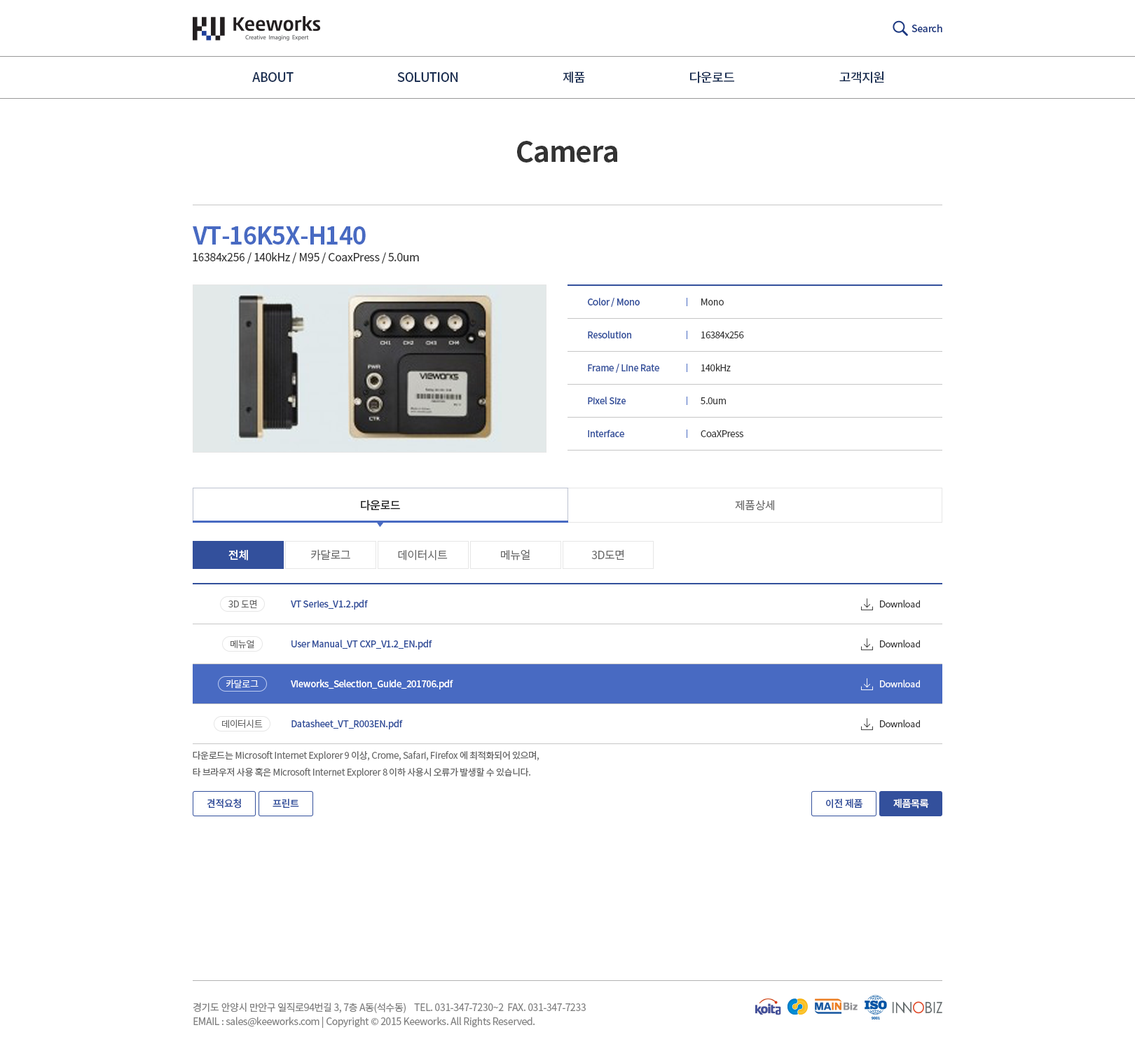
<style>
.page{position:relative;width:1135px;height:1051px;background:#ffffff}
.page>*{position:absolute;margin:0}
.t1{font:9.8px "NotoSansCJKkr-Medium";letter-spacing:-0.025em;color:#1b3780}
.t2{font:12.6px "NotoSansCJKkr-Medium";letter-spacing:-0.025em;color:#1c3053;text-transform:uppercase}
.t3{font:28px "NotoSansCJKkr-Bold";letter-spacing:-0.025em;color:#333333}
.t4{font:23.8px "NotoSansCJKkr-Bold";letter-spacing:-0.025em;color:#486ac2}
.t5{font:11.2px "NotoSansCJKkr-Regular";letter-spacing:-0.025em;color:#333333}
.t6{font:9.1px/32.9px "NotoSansCJKkr-Medium";letter-spacing:-0.025em;color:#33509c}
.t7{font:9.1px/32.9px "NotoSansCJKkr-Regular";letter-spacing:-0.025em;color:#333333}
.t8{font:11.2px "NotoSansCJKkr-Medium";letter-spacing:-0.025em;color:#333333}
.t9{font:11.2px "NotoSansCJKkr-DemiLight";letter-spacing:-0.025em;color:#666666}
.t10{font:11.2px "NotoSansCJKkr-Medium";letter-spacing:-0.025em;color:#ffffff}
.t11{font:9.1px "NotoSansCJKkr-DemiLight";letter-spacing:-0.025em;color:#666666}
.t12{font:9.1px "NotoSansCJKkr-Medium";letter-spacing:-0.025em;color:#33509c}
.t13{font:9.1px "NotoSansCJKkr-DemiLight";letter-spacing:-0.025em;color:#333333}
.t14{font:9.1px "NotoSansCJKkr-DemiLight";letter-spacing:-0.025em;color:#ffffff}
.t15{font:9.1px "NotoSansCJKkr-Medium";letter-spacing:-0.025em;color:#ffffff}
.t16{font:9.1px/16.8px "NotoSansCJKkr-Regular";letter-spacing:-0.025em;color:#666666}
.t17{font:9.8px "NotoSansCJKkr-Medium";letter-spacing:-0.025em;color:#33509c}
.t18{font:9.8px "NotoSansCJKkr-Medium";letter-spacing:-0.025em;color:#ffffff}
.t19{font:9.8px/14px "NotoSansCJKkr-Regular";letter-spacing:-0.025em;color:#808080}
</style>
<div class="page">
<p class="t1" style="left:911px;top:24px;width:31px;height:8px">Search</p>
<p class="t2" style="left:252px;top:72px;width:42px;height:10px">ABOUT</p>
<p class="t2" style="left:397px;top:72px;width:61px;height:10px">SOLUTION</p>
<p class="t2" style="left:563px;top:71px;width:22px;height:12px">제품</p>
<p class="t2" style="left:690px;top:71px;width:44px;height:12px">다운로드</p>
<p class="t2" style="left:839px;top:71px;width:45px;height:12px">고객지원</p>
<p class="t3" style="left:517px;top:141px;width:100px;height:22px">Camera</p>
<p class="t4" style="left:193px;top:226px;width:173px;height:18px">VT-16K5X-H140</p>
<p class="t5" style="left:193px;top:252px;width:226px;height:11px">16384x256 / 140kHz / M95 / CoaxPress / 5.0um</p>
<p class="t6" style="left:588px;top:298px;width:71px;height:139px">Color / Mono<br>Resolution<br>Frame / Line Rate<br>Pixel Size<br>Interface</p>
<p class="t7" style="left:701px;top:298px;width:43px;height:139px">Mono<br>16384x256<br>140kHz<br>5.0um<br>CoaXPress</p>
<p class="t8" style="left:361px;top:499px;width:39px;height:12px">다운로드</p>
<p class="t9" style="left:735px;top:499px;width:39px;height:12px">제품상세</p>
<p class="t10" style="left:228px;top:549px;width:20px;height:11px">전체</p>
<p class="t9" style="left:311px;top:549px;width:39px;height:11px">카달로그</p>
<p class="t9" style="left:398px;top:549px;width:50px;height:11px">데이터시트</p>
<p class="t9" style="left:501px;top:549px;width:29px;height:11px">메뉴얼</p>
<p class="t9" style="left:591px;top:549px;width:33px;height:11px">3D도면</p>
<p class="t11" style="left:228px;top:600px;width:29px;height:8px">3D 도면</p>
<p class="t12" style="left:291px;top:600px;width:77px;height:9px">VT Series_V1.2.pdf</p>
<p class="t13" style="left:880px;top:600px;width:40px;height:7px">Download</p>
<p class="t11" style="left:230px;top:640px;width:24px;height:9px">메뉴얼</p>
<p class="t12" style="left:291px;top:640px;width:141px;height:9px">User Manual_VT CXP_V1.2_EN.pdf</p>
<p class="t13" style="left:880px;top:640px;width:40px;height:7px">Download</p>
<p class="t14" style="left:226px;top:679px;width:32px;height:9px">카달로그</p>
<p class="t15" style="left:291px;top:679px;width:162px;height:10px">Vieworks_Selection_Guide_201706.pdf</p>
<p class="t14" style="left:880px;top:679px;width:40px;height:8px">Download</p>
<p class="t11" style="left:222px;top:719px;width:41px;height:9px">데이터시트</p>
<p class="t12" style="left:291px;top:719px;width:112px;height:10px">Datasheet_VT_R003EN.pdf</p>
<p class="t13" style="left:880px;top:719px;width:40px;height:8px">Download</p>
<p class="t16" style="left:193px;top:750px;width:346px;height:28px">다운로드는 Microsoft Internet Explorer 9 이상, Crome, Safari, Firefox 에 최적화되어 있으며,<br>타 브라우저 사용 혹은 Microsoft Internet Explorer 8 이하 사용시 오류가 발생할 수 있습니다.</p>
<p class="t17" style="left:207px;top:799px;width:34px;height:9px">견적요청</p>
<p class="t17" style="left:272px;top:799px;width:27px;height:9px">프린트</p>
<p class="t17" style="left:826px;top:799px;width:36px;height:9px">이전 제품</p>
<p class="t18" style="left:893px;top:799px;width:36px;height:9px">제품목록</p>
<p class="t19" style="left:193px;top:1002px;width:393px;height:26px">경기도 안양시 만안구 일직로94번길 3, 7층 A동(석수동)    TEL. 031-347-7230~2  FAX. 031-347-7233<br>EMAIL : sales@keeworks.com | Copyright © 2015 Keeworks. All Rights Reserved.</p>
</div>
